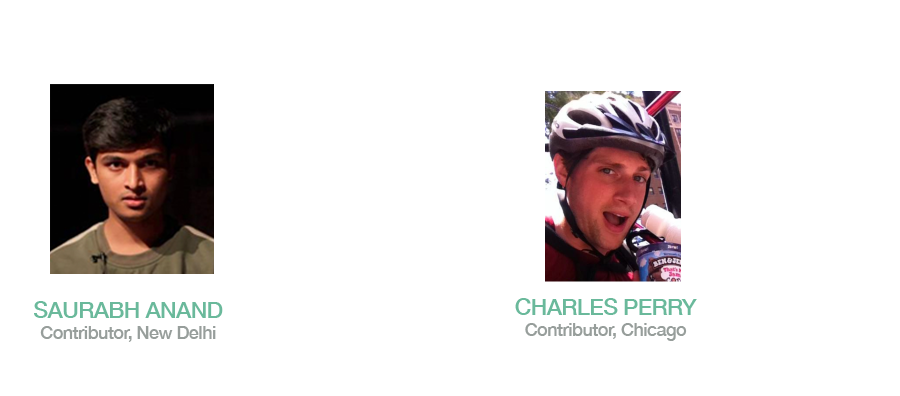
<style>
.page{position:relative;width:900px;height:396px;background:#ffffff}
.page>*{position:absolute;margin:0}
.t1{font:18px "HelveticaNeue-Medium";letter-spacing:-0.03em;color:#979e9b}
.t2{font:23px "HelveticaNeue-Medium";letter-spacing:-0.03em;color:#6ab99b}
</style>
<div class="page">
<p class="t1" style="left:34px;top:301px;width:189px;height:41px;text-align:center"><span class="t2">SAURABH ANAND<br></span>Contributor, New Delhi</p>
<p class="t1" style="left:515px;top:298px;width:182px;height:43px;text-align:center"><span class="t2">CHARLES PERRY<br></span>Contributor, Chicago</p>
</div>
